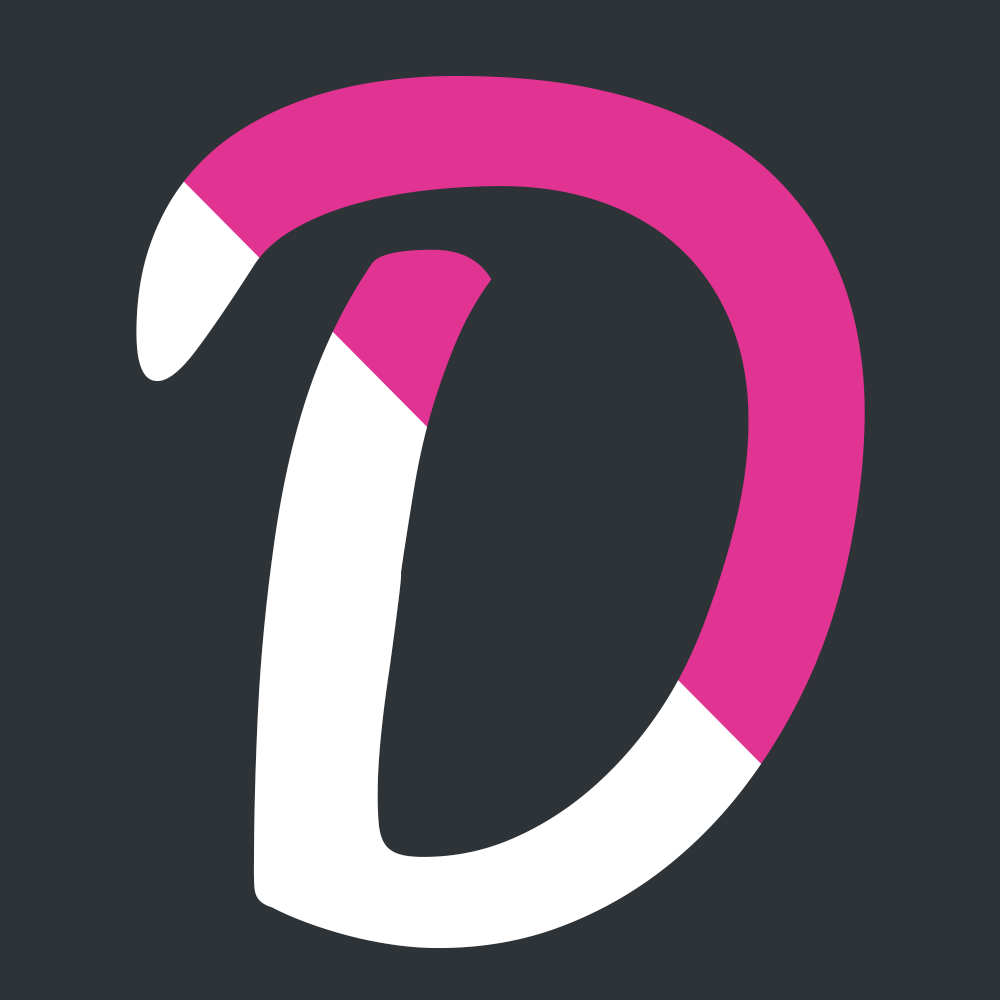
<style>
.page{position:relative;width:1000px;height:1000px;background:#2e3338}
.page>*{position:absolute;margin:0}
.t1{font:974.3px "Pacifico"}
</style>
<div class="page">
<p class="t1" style="left:136px;top:76px;width:729px;height:872px">D</p>
</div>
